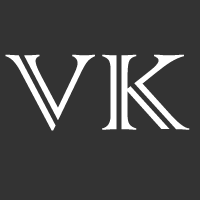
<style>
.page{position:relative;width:200px;height:200px;background:#333333}
.page>*{position:absolute;margin:0}
.t1{font:142.7px "ColonnaMT";color:#ffffff}
</style>
<div class="page">
<p class="t1" style="left:5px;top:54px;width:185px;height:77px">VK</p>
</div>
